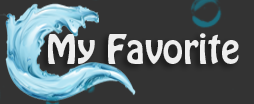
<style>
.page{position:relative;width:254px;height:104px;background:#333333}
.page>*{position:absolute;margin:0}
.t1{font:36px "HoboStd";color:#eeeeee}
</style>
<div class="page">
<p class="t1" style="left:48px;top:33px;width:191px;height:31px">My Favorite</p>
</div>
